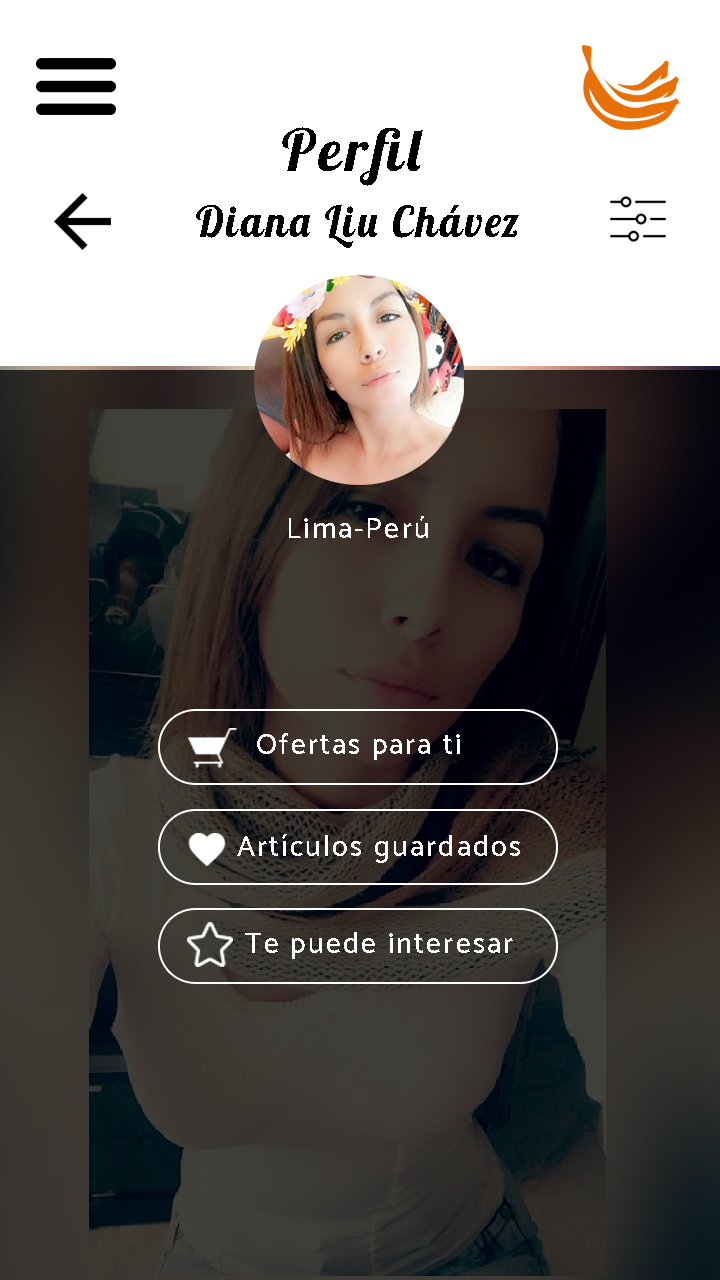
<style>
.page{position:relative;width:720px;height:1280px;background:#ffffff}
.page>*{position:absolute;margin:0}
.t1{font:58.3px "Lobster-Regular";letter-spacing:0.075em;color:#000000}
.t2{font:41.7px "Lobster-Regular";letter-spacing:0.075em;color:#000000}
.t3{font:29.2px "Catamaran-Medium";letter-spacing:0.075em;color:#ffffff}
</style>
<div class="page">
<p class="t1" style="left:282px;top:127px;width:141px;height:59px">Perfil</p>
<p class="t2" style="left:196px;top:205px;width:323px;height:43px">Diana Liu Chávez</p>
<p class="t3" style="left:289px;top:516px;width:139px;height:22px">Lima-Perú</p>
<p class="t3" style="left:257px;top:733px;width:203px;height:27px">Ofertas para ti</p>
<p class="t3" style="left:237px;top:834px;width:283px;height:29px">Artículos guardados</p>
<p class="t3" style="left:245px;top:932px;width:268px;height:27px">Te puede interesar</p>
</div>
